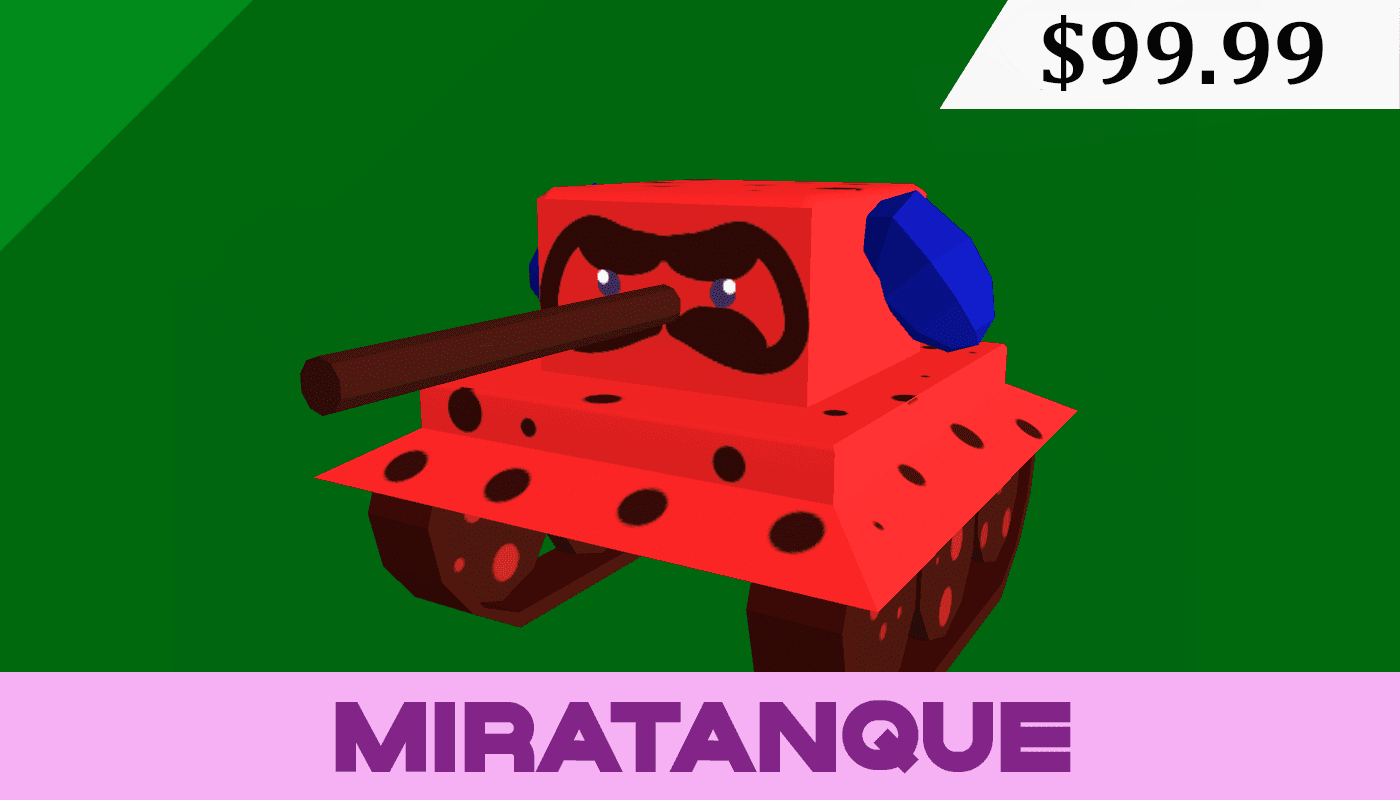
<style>
.page{position:relative;width:1400px;height:800px;background:#00680d}
.page>*{position:absolute;margin:0}
.t1{font:92.3px "Cambria-Bold";color:#050505}
</style>
<div class="page">
<p class="t1" style="left:1043px;top:15px;width:280px;height:76px">$99.99</p>
</div>
